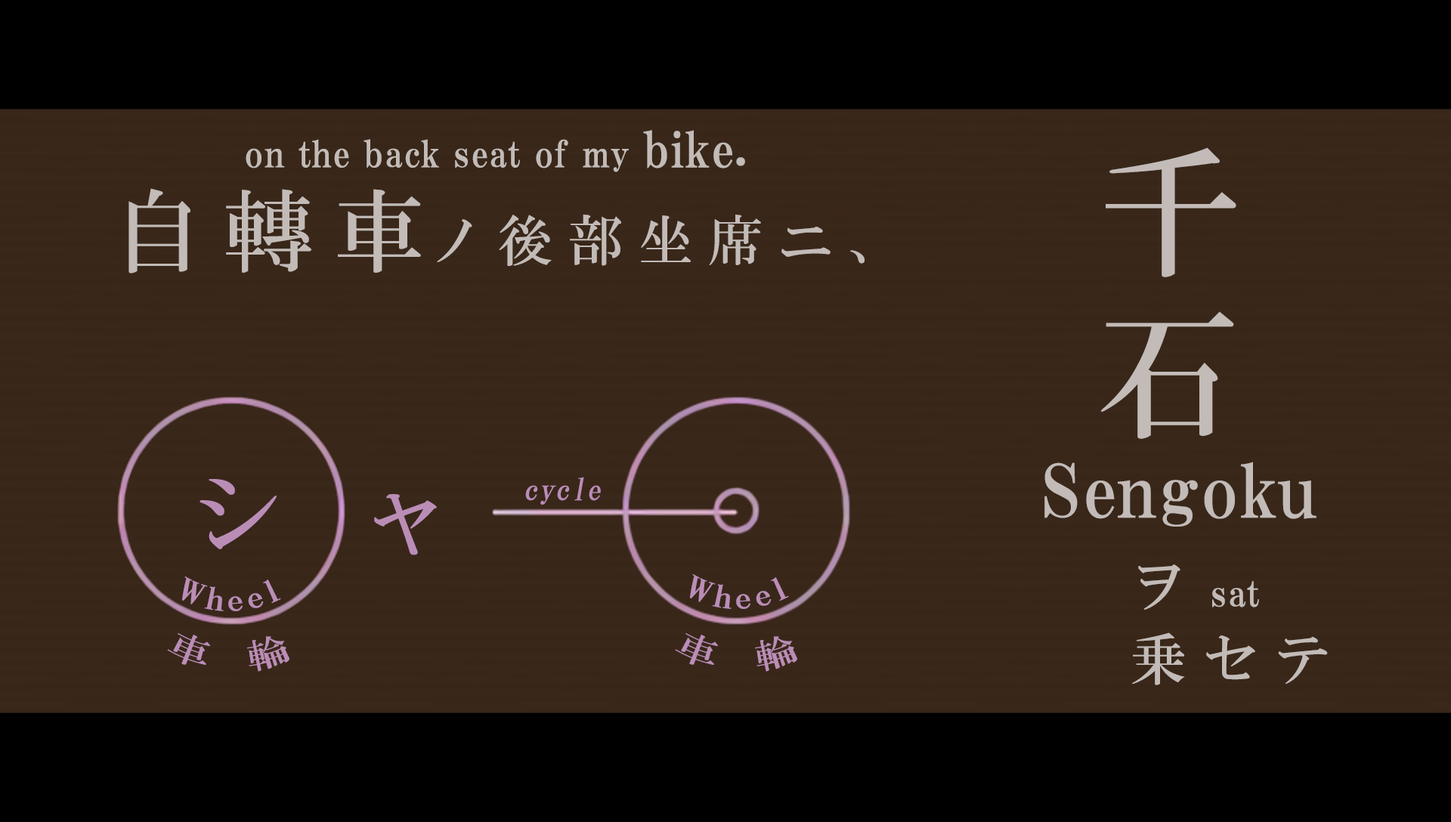
<style>
.page{position:relative;width:1451px;height:822px;background:#382719}
.page>*{position:absolute;margin:0}
.t1{font:36.3px "HGPMinchoE";letter-spacing:0.025em;color:#c2bbb7}
.t2{font:48.4px "HGPMinchoE";letter-spacing:0.025em;color:#c2bbb7}
.t3{font:143.6px/209.3px "HGMinchoB";letter-spacing:0.13em;color:#c2bbb7}
.t4{font:90.7px "HGMinchoB";letter-spacing:0.21em;color:#c2bbb7}
.t5{font:55.2px "HGMinchoB";letter-spacing:0.27em;color:#c2bbb7}
.t6{font:72.5px "HGPMinchoE";letter-spacing:0.01em;color:#c2bbb7}
.t7{font:90.7px "HGMinchoB";letter-spacing:0.21em;color:#ba8db6}
.t8{font:30.2px "HGMinchoB";letter-spacing:0.025em;color:#ba8db6;font-style:italic}
.t9{font:55.2px/73.3px "HGMinchoB";letter-spacing:0.31em;color:#c2bbb7}
.t10{font:30.2px "HGMinchoB";letter-spacing:0.05em;color:#ba8db6}
.t11{font:30.2px "HGMinchoB";letter-spacing:0.05em;color:#ba8db6;scale:1.5 1}
.t12{font:34px "HGMinchoB";letter-spacing:0.21em;color:#ba8db6}
</style>
<div class="page">
<p class="t1" style="left:246px;top:130px;width:499px;height:42px">on the back seat of my <span class="t2">bike.</span></p>
<p class="t3" style="left:1100px;top:147px;width:136px;height:292px">千石</p>
<p class="t4" style="left:128px;top:188px;width:293px;height:86px">自轉車</p>
<p class="t5" style="left:437px;top:215px;width:427px;height:52px">ノ後部坐席ニ、</p>
<p class="t6" style="left:1044px;top:462px;width:272px;height:65px">Sengoku</p>
<p class="t7" style="left:199px;top:479px;width:78px;height:70px">シ</p>
<p class="t8" style="left:525px;top:477px;width:76px;height:28px">cycle</p>
<p class="t7" style="left:374px;top:494px;width:63px;height:61px">ャ</p>
<p class="t9" style="left:1132px;top:564px;width:195px;height:121px">ヲ<br>乗セテ</p>
<p class="t10" style="left:181px;top:576px;width:100px;height:35px"><span class="t11">W</span>heel</p>
<p class="t10" style="left:689px;top:574px;width:100px;height:35px"><span class="t11">W</span>heel</p>
<p class="t1" style="left:1212px;top:581px;width:47px;height:26px">sat</p>
<p class="t12" style="left:167px;top:633px;width:122px;height:39px">車 輪</p>
<p class="t12" style="left:675px;top:633px;width:122px;height:39px">車 輪</p>
</div>
